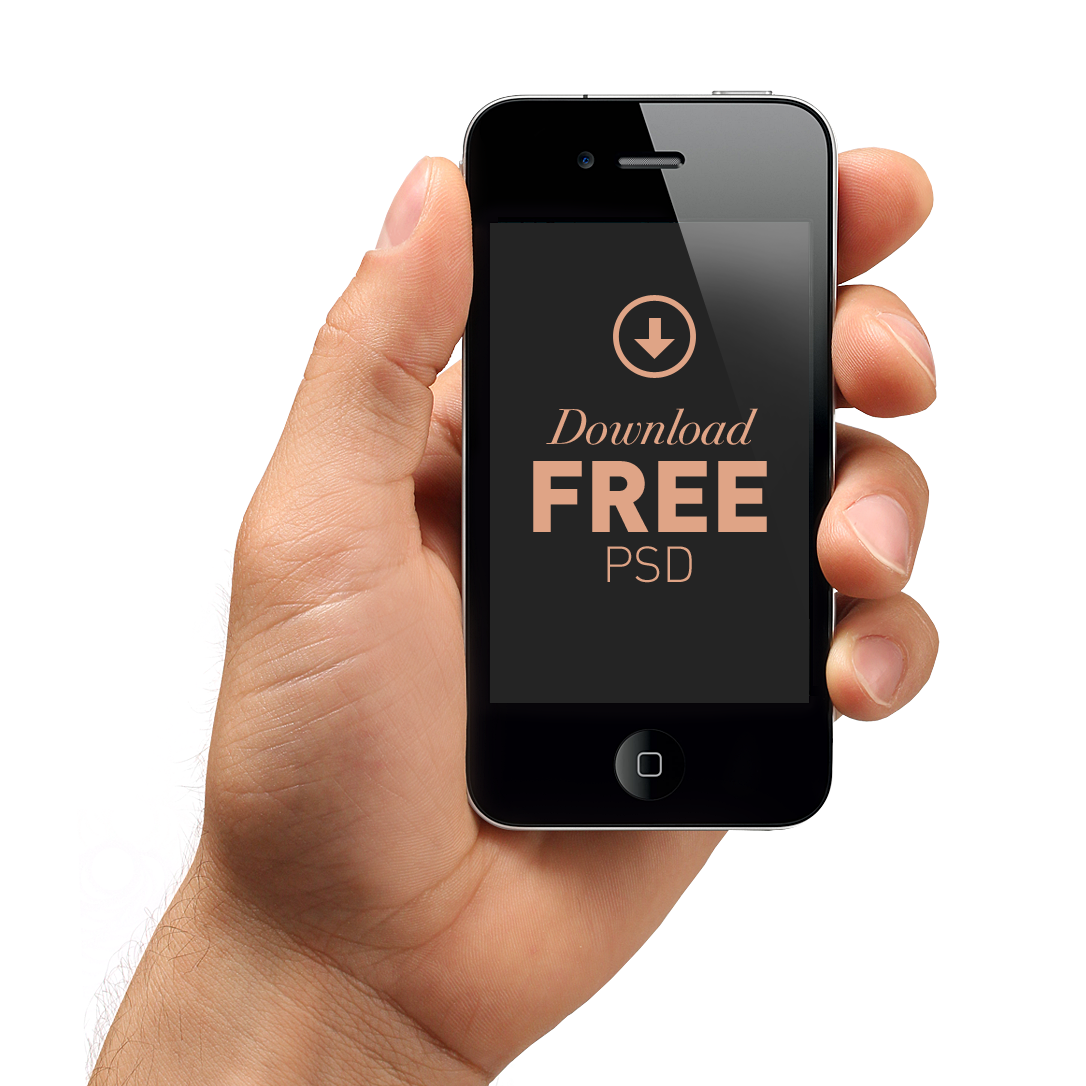
<style>
.page{position:relative;width:1086px;height:1086px;background:#ffffff}
.page>*{position:absolute;margin:0}
.t1{font:50px "Bodoni72C-Italic";color:#dfa486}
.t2{font:100px "DINPro-Black";color:#dfa486}
.t3{font:50px "DINPro-Light";color:#dfa486}
</style>
<div class="page">
<p class="t1" style="left:546px;top:408px;width:212px;height:37px">Download</p>
<p class="t2" style="left:533px;top:461px;width:234px;height:71px">FREE</p>
<p class="t3" style="left:607px;top:546px;width:85px;height:37px">PSD</p>
</div>
